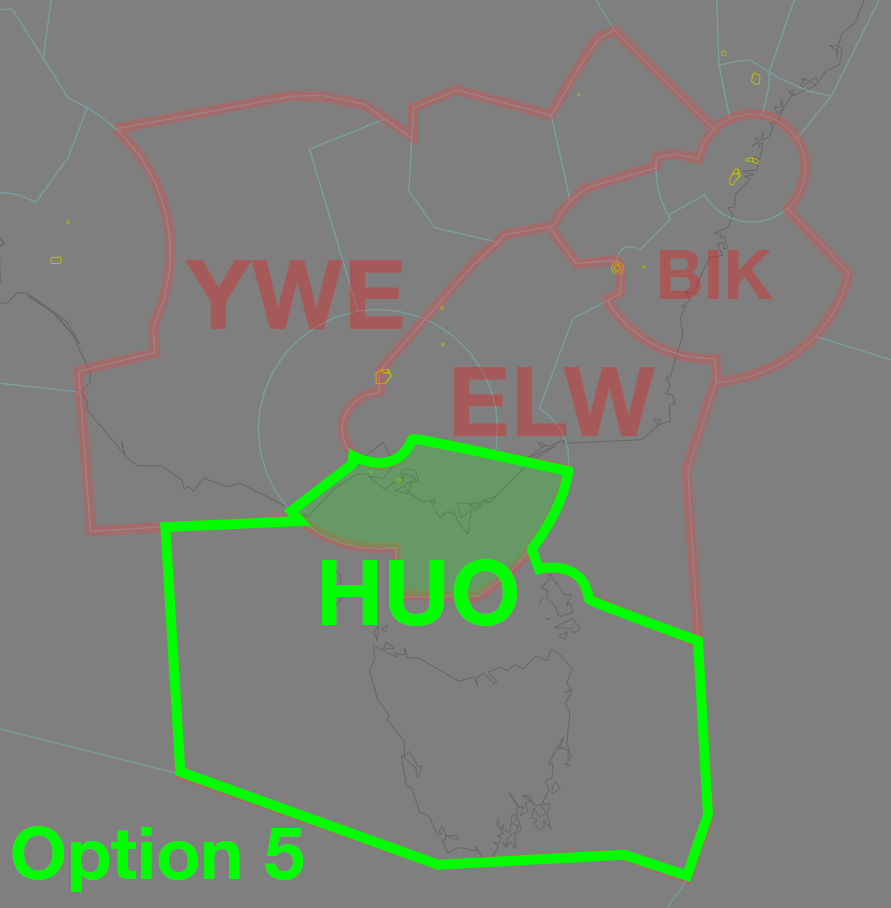
<style>
.page{position:relative;width:891px;height:908px;background:#7f7f7f}
.page>*{position:absolute;margin:0}
.t1{font:68.7px "HelveticaNeueLTStd-Bd";color:#a65959}
.t2{font:97.3px "HelveticaNeueLTStd-Bd";color:#a65959}
.t3{font:91.6px "HelveticaNeueLTStd-Bd";color:#00ff00}
.t4{font:72.5px "HelveticaNeueLTStd-Bd";color:#00ff00}
</style>
<div class="page">
<p class="t1" style="left:660px;top:250px;width:113px;height:49px">BIK</p>
<p class="t2" style="left:185px;top:260px;width:218px;height:69px">YWE</p>
<p class="t2" style="left:453px;top:367px;width:202px;height:69px">ELW</p>
<p class="t3" style="left:322px;top:559px;width:195px;height:67px">HUO</p>
<p class="t4" style="left:12px;top:826px;width:292px;height:66px">Option 5</p>
</div>
